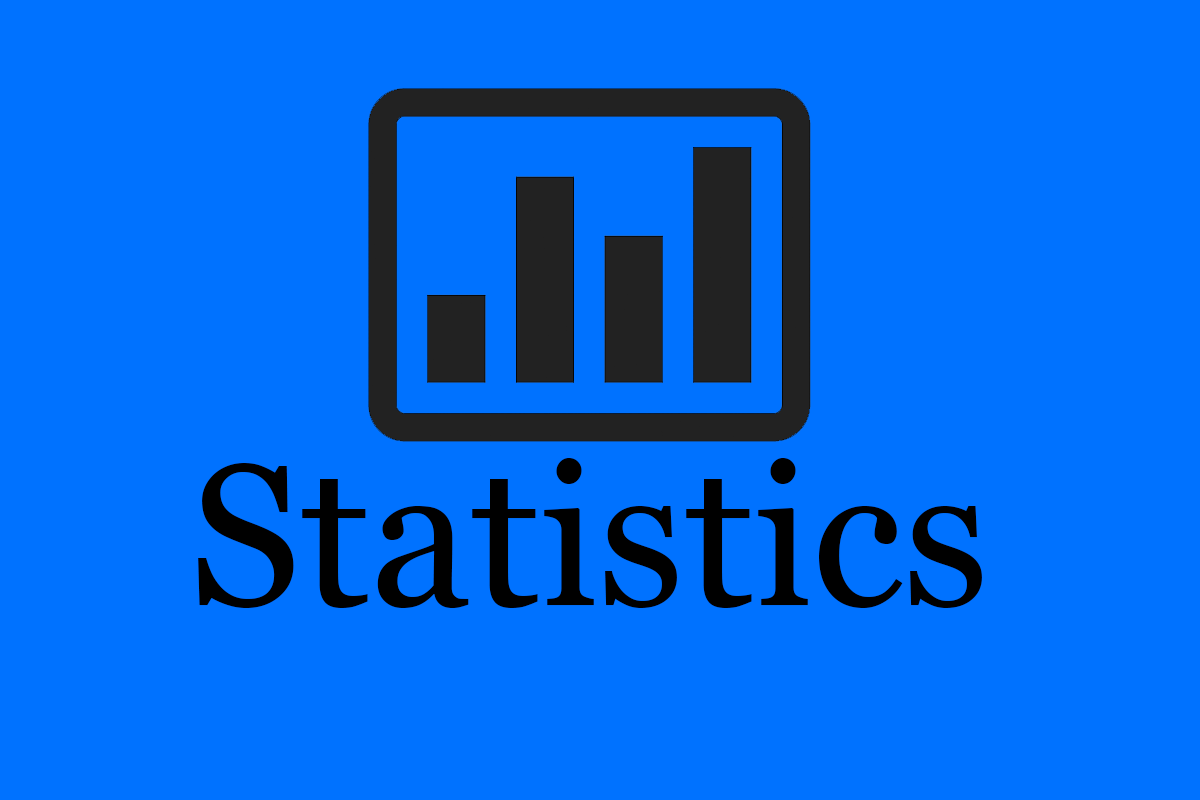
<style>
.page{position:relative;width:1200px;height:800px;background:#0072ff}
.page>*{position:absolute;margin:0}
.t1{font:200px "Georgia";color:#000000}
</style>
<div class="page">
<p class="t1" style="left:198px;top:458px;width:784px;height:150px">Statistics</p>
</div>
